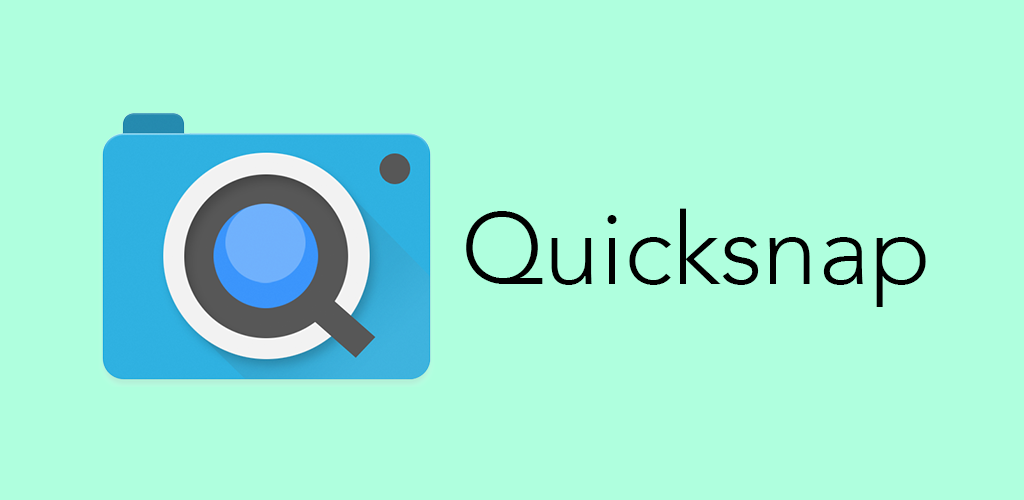
<style>
.page{position:relative;width:1024px;height:500px;background:#afffde}
.page>*{position:absolute;margin:0}
.t1{font:100px "Avenir-Light";color:#000000}
</style>
<div class="page">
<p class="t1" style="left:466px;top:208px;width:460px;height:99px">Quicksnap</p>
</div>
